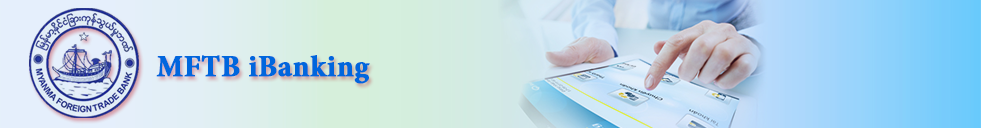
<style>
.page{position:relative;width:981px;height:128px}
.page>*{position:absolute;margin:0}
.t1{font:30px "MinionPro-Bold";color:#0066dd;font-weight:bold}
</style>
<div class="page">
<p class="t1" style="left:156px;top:55px;width:214px;height:29px">MFTB iBanking</p>
</div>
